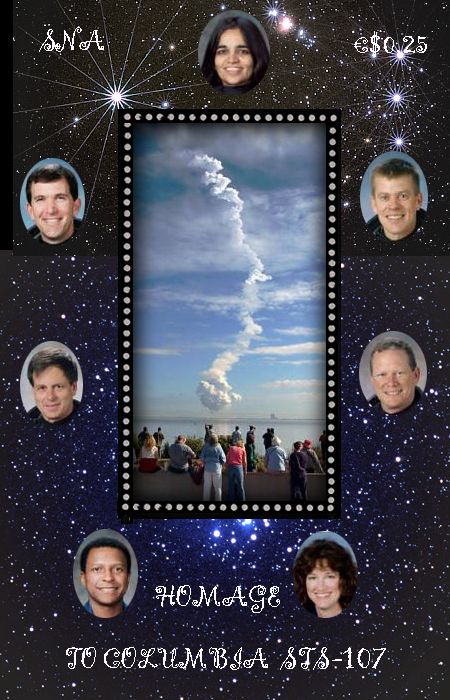
<style>
.page{position:relative;width:450px;height:700px}
.page>*{position:absolute;margin:0}
.t1{font:30px "Gigi-Regular";color:#fcfaff}
.t2{font:24px "Gigi-Regular";color:#fcfaff}
.t3{font:36px "Gigi-Regular";color:#fcfaff}
</style>
<div class="page">
<p class="t1" style="left:39px;top:27px;width:65px;height:25px">SNA</p>
<p class="t1" style="left:354px;top:31px;width:73px;height:26px"><span class="t2">€</span>$0.25</p>
<p class="t1" style="left:155px;top:585px;width:125px;height:28px">HOMAGE</p>
<p class="t1" style="left:66px;top:647px;width:320px;height:23px">TO COLUMBIA  STS-<span class="t3">107</span></p>
</div>
